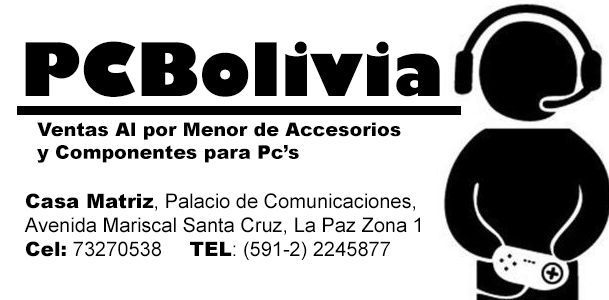
<style>
.page{position:relative;width:609px;height:300px;background:#ffffff}
.page>*{position:absolute;margin:0}
.t1{font:72px "GillSans-UltraBold";color:#000000}
.t2{font:19px "Arial-Black";color:#000000}
.t3{font:20px "ArialMT";color:#000000}
.t4{font:20px "Arial-Black";color:#000000}
</style>
<div class="page">
<p class="t1" style="left:25px;top:41px;width:415px;height:56px">PCBolivia</p>
<p class="t2" style="left:37px;top:122px;width:364px;height:41px">Ventas Al por Menor de Accesorios <br>y Componentes para Pc’s</p>
<p class="t3" style="left:24px;top:193px;width:396px;height:67px"><span class="t4">Casa Matriz</span>, Palacio de Comunicaciones, <br>Avenida Mariscal Santa Cruz, La Paz Zona 1<br><span class="t4">Cel:</span> 73270538     <span class="t4">TEL</span>: (591-2) 2245877</p>
</div>
